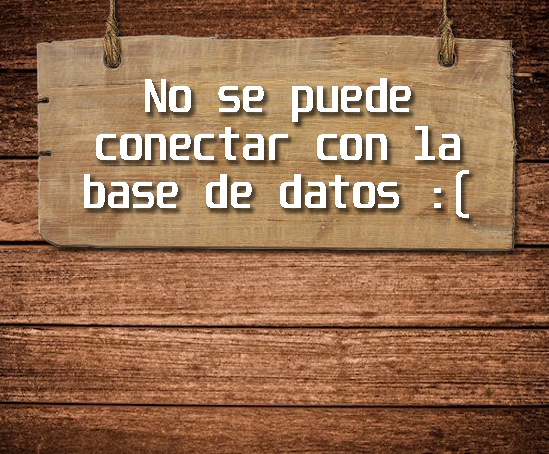
<style>
.page{position:relative;width:549px;height:454px}
.page>*{position:absolute;margin:0}
.t1{font:40.1px "Unispace-Bold";color:#ffffff}
</style>
<div class="page">
<p class="t1" style="left:84px;top:78px;width:385px;height:140px;text-align:center">No se puede conectar con la base de datos :(</p>
</div>
